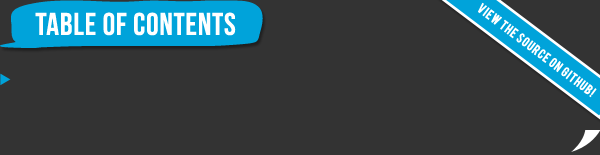
<style>
.page{position:relative;width:600px;height:155px;background:#333333}
.page>*{position:absolute;margin:0}
.t1{font:129.6px "BergamotOrnaments";letter-spacing:0.025em;color:#00a3da}
.t2{font:11px "Bebas";letter-spacing:0.075em;color:#ffffff}
.t3{font:31.4px "BebasNeue";letter-spacing:0.025em;color:#ffffff}
</style>
<div class="page">
<p class="t1" style="left:0px;top:0px;width:263px;height:48px">f</p>
<p class="t2" style="left:478px;top:2px;width:119px;height:96px;rotate:37deg">view the source on github!</p>
<p class="t3" style="left:35px;top:12px;width:201px;height:24px">Table of contents</p>
</div>
